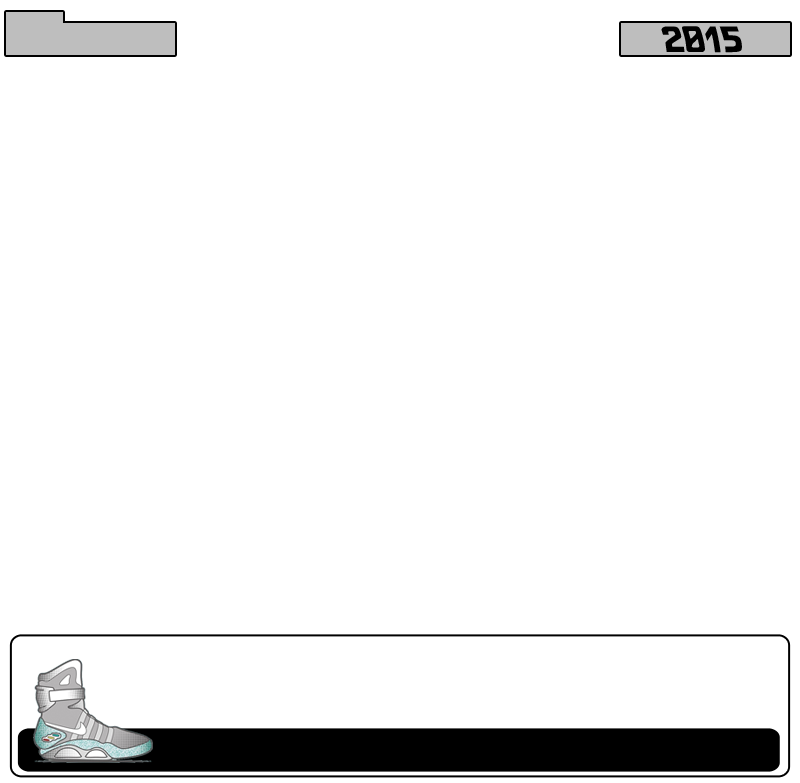
<style>
.page{position:relative;width:800px;height:783px;background:#ffffff}
.page>*{position:absolute;margin:0}
.t1{font:28.9px "Backtothefuture2002-Regular";color:#000000;scale:0.88 1}
</style>
<div class="page">
<p class="t1" style="left:661px;top:26px;width:81px;height:27px">2015</p>
</div>
